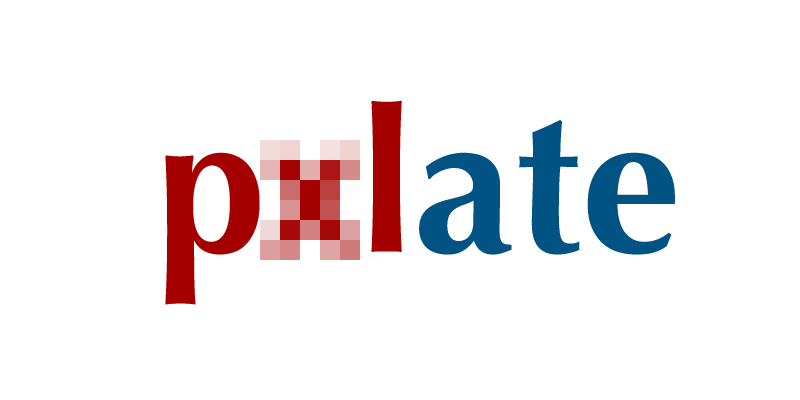
<style>
.page{position:relative;width:800px;height:400px;background:#ffffff}
.page>*{position:absolute;margin:0}
.t1{font:200px "Optima-Bold";color:#a40000}
.t2{font:200px "Optima-Bold";color:#005383}
</style>
<div class="page">
<p class="t1" style="left:165px;top:100px;width:510px;height:205px">p  l<span class="t2">ate</span></p>
</div>
